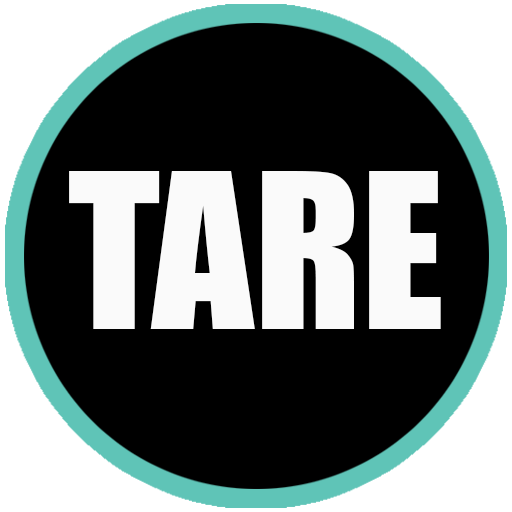
<style>
.page{position:relative;width:512px;height:512px;background:#000000}
.page>*{position:absolute;margin:0}
.t1{font:200px "Impact";color:#fafafa}
</style>
<div class="page">
<p class="t1" style="left:69px;top:171px;width:372px;height:158px">TARE</p>
</div>
